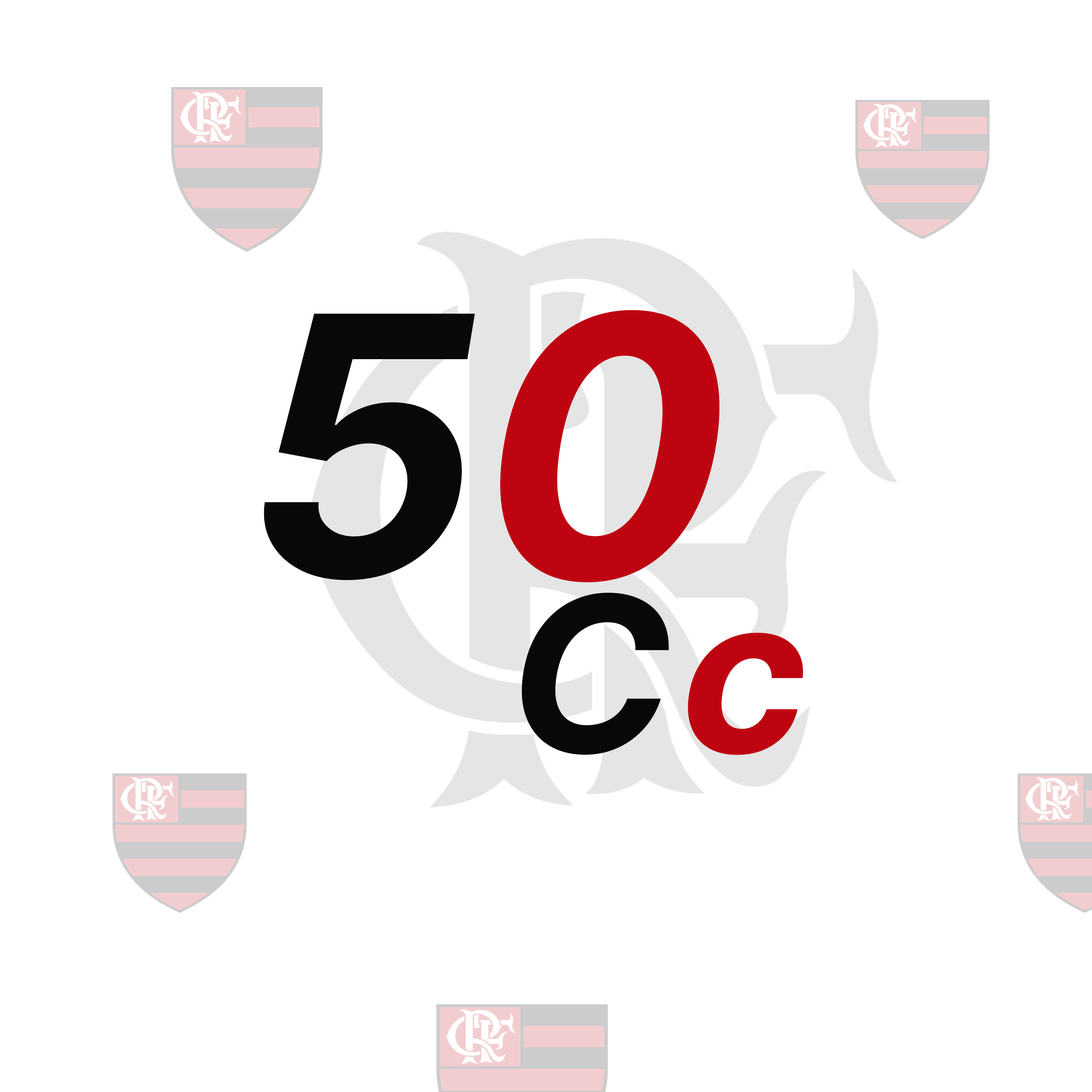
<style>
.page{position:relative;width:1092px;height:1092px;background:#ffffff}
.page>*{position:absolute;margin:0}
.t1{font:361.1px "Inter-BoldItalic";letter-spacing:0.03em;color:#080808;font-style:italic}
.t2{font:361.1px "Inter-BoldItalic";letter-spacing:0.03em;color:#bf0411;font-style:italic}
.t3{font:216.7px "Inter-BoldItalic";letter-spacing:0.06em;color:#080808;font-style:italic}
.t4{font:216.7px "Inter-BoldItalic";letter-spacing:0.06em;color:#bf0411;font-style:italic}
</style>
<div class="page">
<p class="t1" style="left:264px;top:310px;width:456px;height:272px">5<span class="t2">0</span></p>
<p class="t3" style="left:522px;top:592px;width:281px;height:163px">C<span class="t4">c</span></p>
</div>
